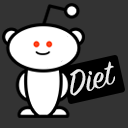
<style>
.page{position:relative;width:128px;height:128px;background:#333333}
.page>*{position:absolute;margin:0}
.t1{font:37.9px "SignPainter-HouseScript";color:#e9e9e9}
</style>
<div class="page">
<p class="t1" style="left:70px;top:61px;width:45px;height:35px;rotate:-17deg">Diet</p>
</div>
